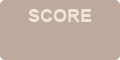
<style>
.page{position:relative;width:120px;height:60px;background:#bdaa9c}
.page>*{position:absolute;margin:0}
.t1{font:18px "Arial-BoldMT";color:#efe3d6}
</style>
<div class="page">
<p class="t1" style="left:28px;top:9px;width:64px;height:13px">SCORE</p>
</div>
